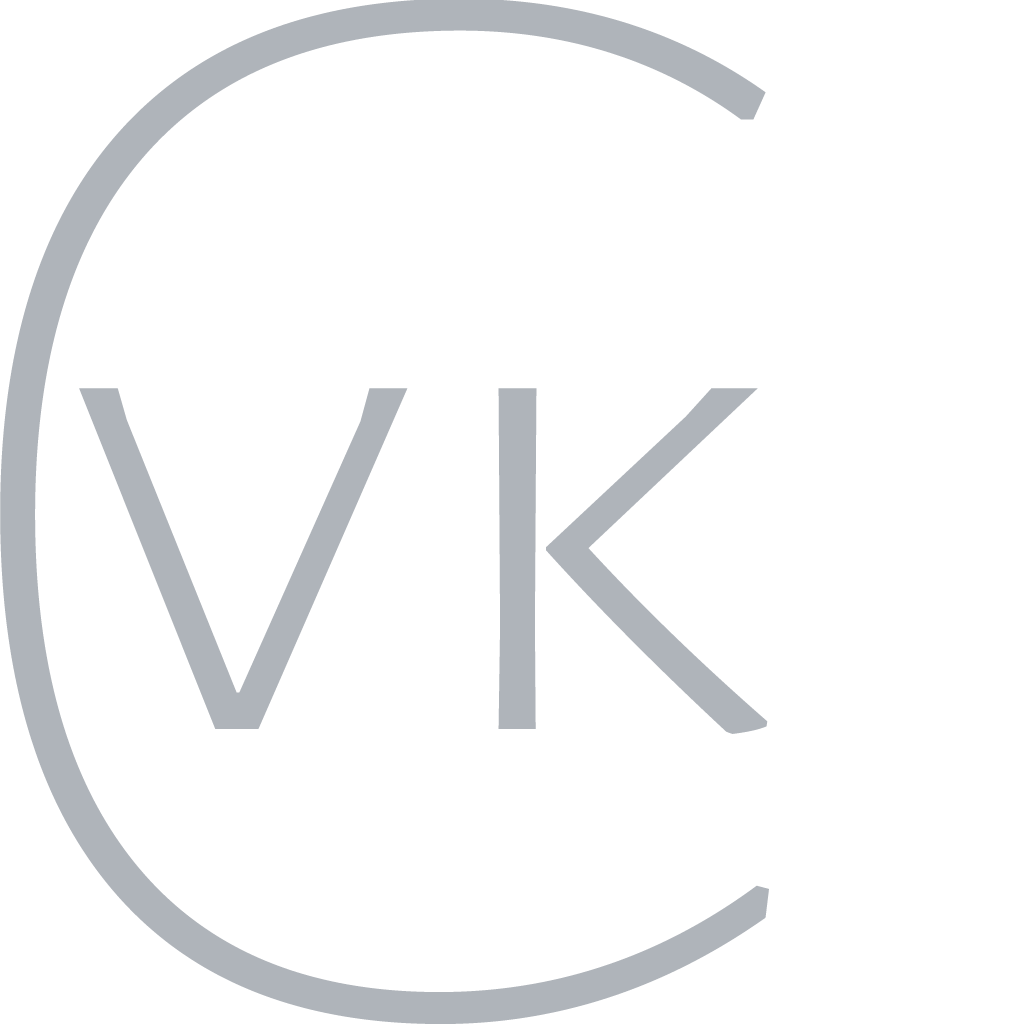
<style>
.page{position:relative;width:1024px;height:1024px;background:#ffffff}
.page>*{position:absolute;margin:0}
.t1{font:1587.3px "AlegreyaSansSC-Thin";color:#afb4ba;scale:1.09 1}
.t2{font:687.8px "AlegreyaSansSC-Light";color:#afb4ba;scale:1.09 1}
</style>
<div class="page">
<p class="t1" style="left:0px;top:0px;width:769px;height:1024px">C</p>
<p class="t2" style="left:79px;top:388px;width:689px;height:346px">vk</p>
</div>
